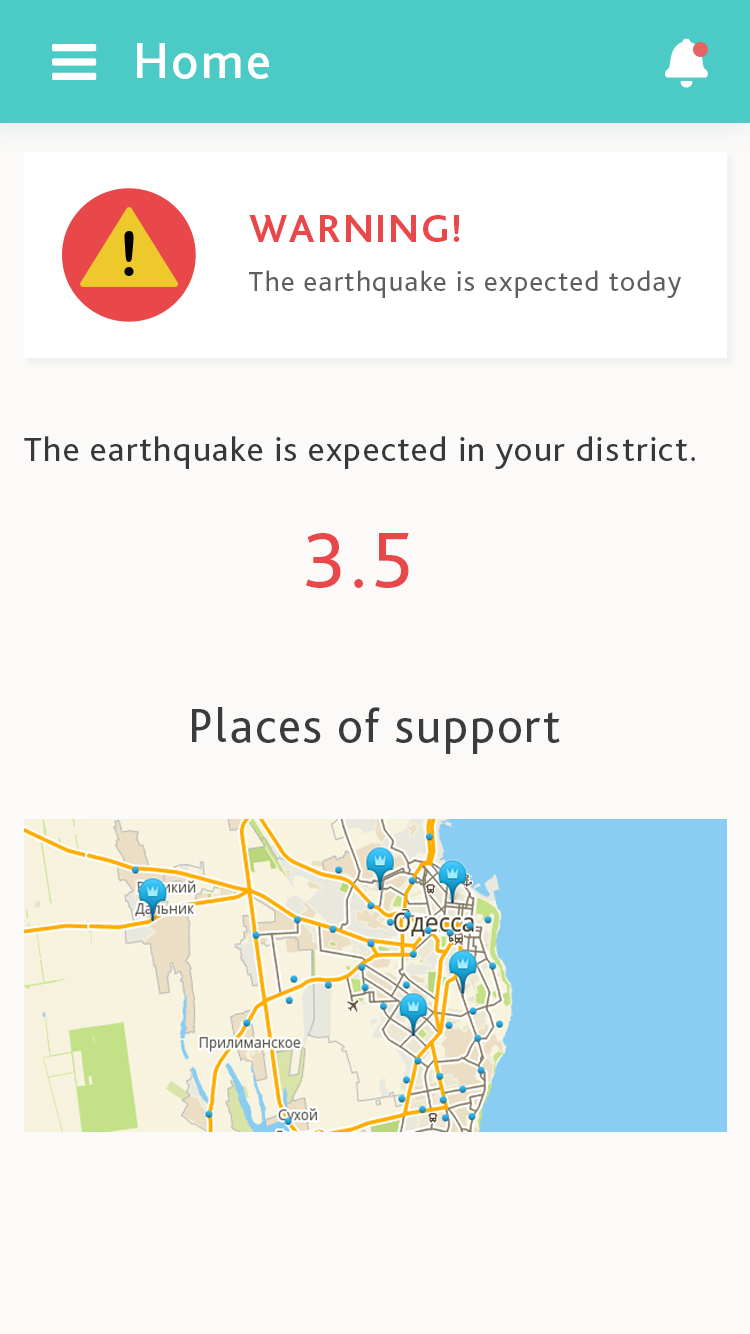
<style>
.page{position:relative;width:750px;height:1334px;background:#fbfaf9}
.page>*{position:absolute;margin:0}
.t1{font:51.7px "BlissPro-Medium";letter-spacing:0.04em;color:#ffffff}
.t2{font:29.1px/49px "BlissPro";letter-spacing:0.04em;color:#5e5e5e}
.t3{font:41.1px/87px "BlissPro-Bold";letter-spacing:0.04em;color:#e84849}
.t4{font:35.1px "BlissPro";letter-spacing:0.04em;color:#383838}
.t5{font:81.4px "BlissPro";letter-spacing:0.04em;color:#e84849}
.t6{font:48.9px "BlissPro";letter-spacing:0.04em;color:#3b3b3b}
</style>
<div class="page">
<p class="t1" style="left:137px;top:43px;width:132px;height:36px">Home</p>
<p class="t2" style="left:249px;top:215px;width:432px;height:83px"><span class="t3">WARNING!<br></span>The earthquake is expected today</p>
<p class="t4" style="left:24px;top:436px;width:671px;height:33px">Тhe earthquake is expected in your district.</p>
<p class="t5" style="left:306px;top:533px;width:103px;height:55px">3.5</p>
<p class="t6" style="left:192px;top:707px;width:368px;height:47px">Places of support</p>
</div>
